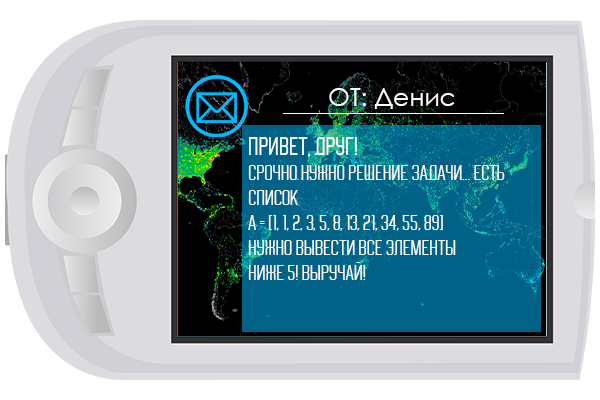
<style>
.page{position:relative;width:600px;height:400px;background:#dcdbe0}
.page>*{position:absolute;margin:0}
.t1{font:25px "CenturyGothic";color:#ffffff}
.t2{font:20.8px "Buyan-Regular";color:#ffffff}
.t3{font:25px "Buyan-Regular";color:#ffffff}
</style>
<div class="page">
<p class="t1" style="left:329px;top:88px;width:126px;height:21px">ОТ: Денис</p>
<p class="t2" style="left:248px;top:137px;width:257px;height:143px"><span class="t3">Привет, друг!<br></span>Срочно нужно решение задачи... Есть список<br>a = [1, 1, 2, 3, 5, 8, 13, 21, 34, 55, 89]<br>Нужно вывести все элементы<br>ниже 5! Выручай!</p>
</div>
